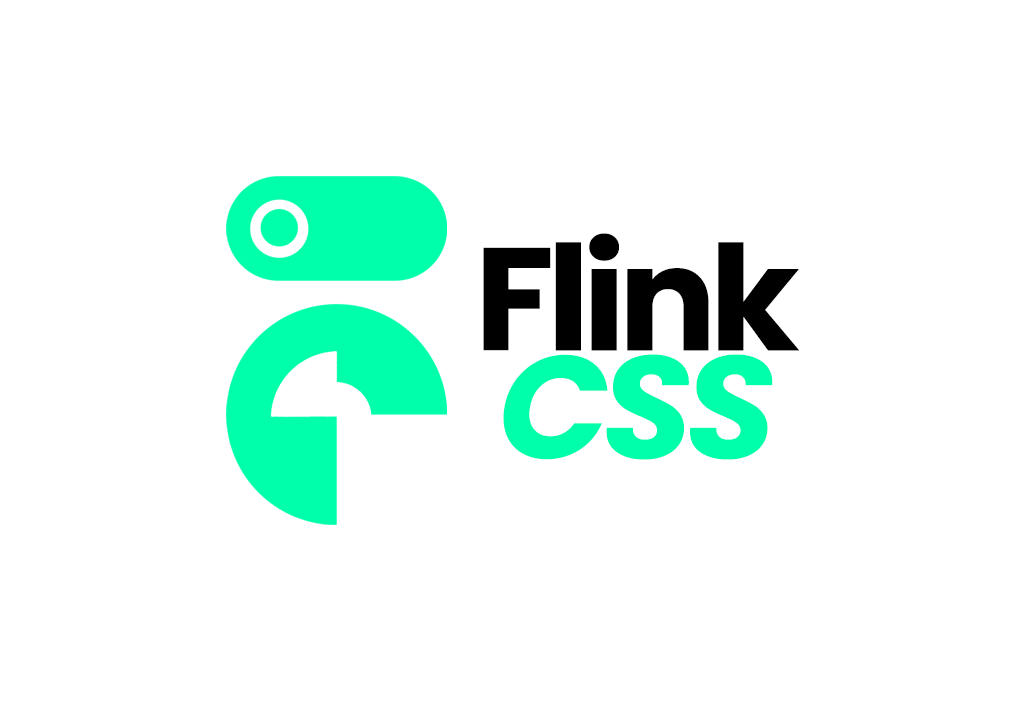
<style>
.page{position:relative;width:1026px;height:701px;background:#ffffff}
.page>*{position:absolute;margin:0}
.t1{font:145.8px "Poppins-Bold";letter-spacing:-0.05em;color:#000000}
.t2{font:145.8px "Poppins-BoldItalic";letter-spacing:-0.05em;color:#00ffaa}
</style>
<div class="page">
<p class="t1" style="left:483px;top:233px;width:317px;height:118px">Flink</p>
<p class="t2" style="left:503px;top:354px;width:270px;height:106px">CSS</p>
</div>
